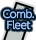
<style>
.page{position:relative;width:36px;height:40px;background:#ffffff}
.page>*{position:absolute;margin:0}
.t1{font:10px/11px "UDShinGoPro-Light";letter-spacing:-0.04em;color:#a4c6fd;font-weight:bold}
</style>
<div class="page">
<p class="t1" style="left:3px;top:9px;width:31px;height:21px;text-align:center">Comb.<br>Fleet</p>
</div>
